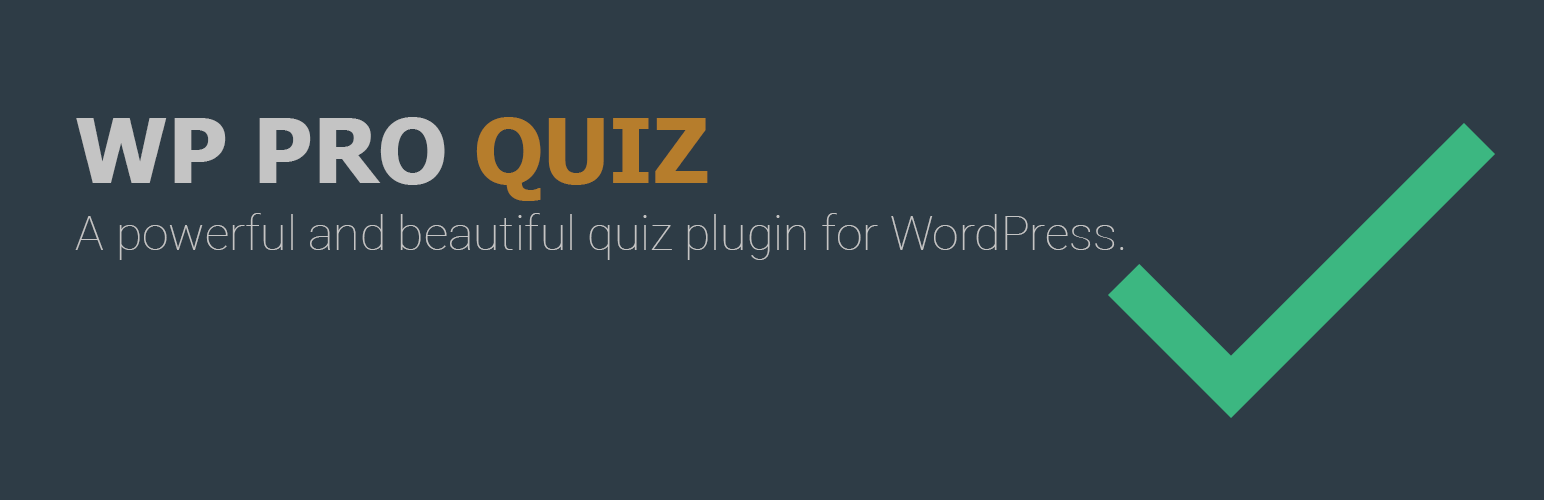
<style>
.page{position:relative;width:1544px;height:500px;background:#2e3c46}
.page>*{position:absolute;margin:0}
.t1{font:90px "Tahoma-Bold";color:#c4c4c4}
.t2{font:90px "Tahoma-Bold";color:#b67d2c}
.t3{font:48px "Roboto-Thin";color:#c4c4c4}
</style>
<div class="page">
<p class="t1" style="left:76px;top:117px;width:632px;height:84px">WP PRO <span class="t2">QUIZ</span></p>
<p class="t3" style="left:75px;top:213px;width:1049px;height:47px">A powerful and beautiful quiz plugin for WordPress.</p>
</div>
